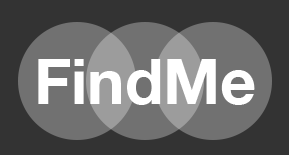
<style>
.page{position:relative;width:289px;height:155px;background:#333333}
.page>*{position:absolute;margin:0}
.t1{font:63px "HelveticaNeue-Bold";color:#ffffff}
</style>
<div class="page">
<p class="t1" style="left:38px;top:59px;width:217px;height:46px">FindMe</p>
</div>
